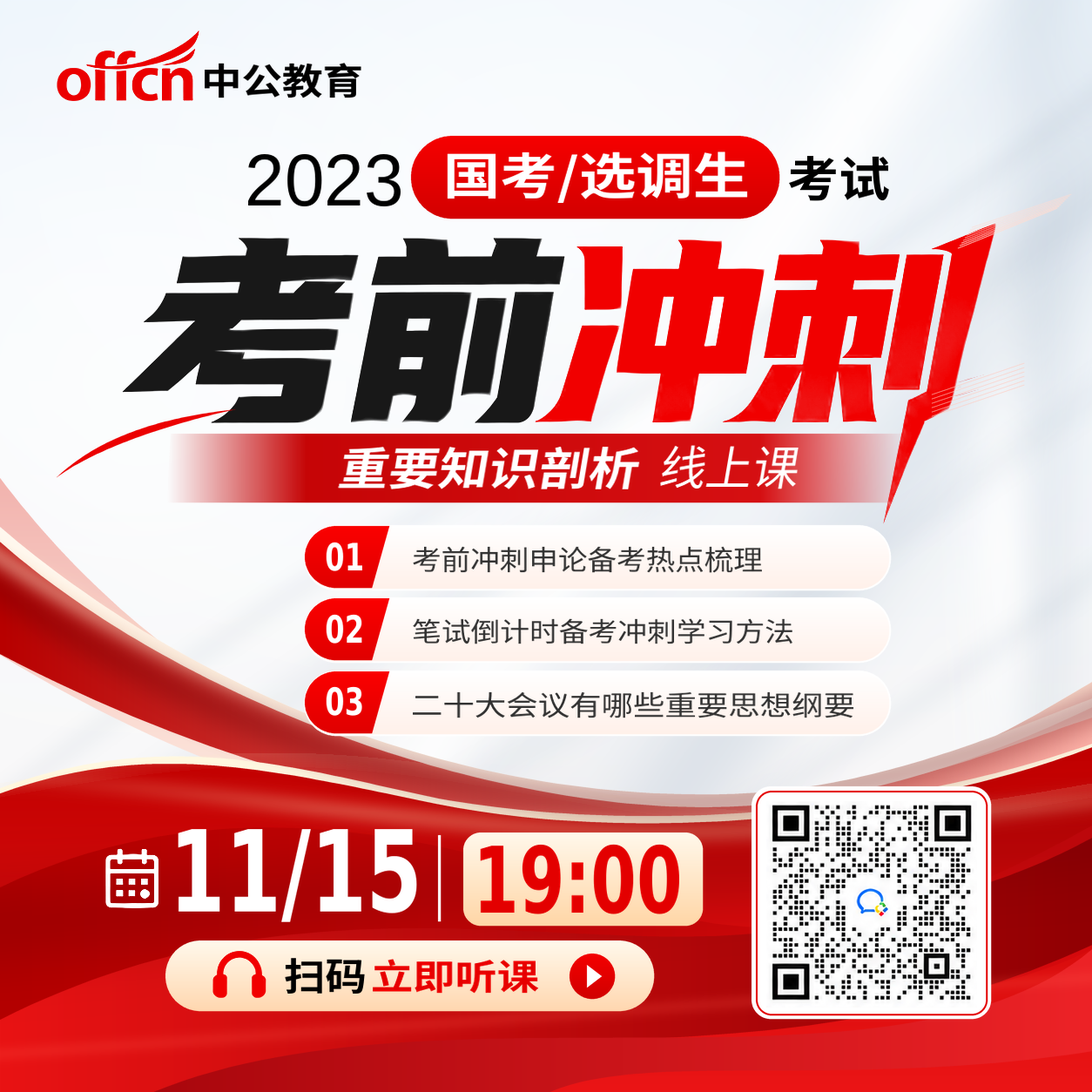
<style>
.page{position:relative;width:1092px;height:1092px}
.page>*{position:absolute;margin:0}
.t1{font:35.7px "NotoSansCJKsc-Bold";color:#000000;scale:1.13 1}
.t2{font:73.3px "LiberationSans";color:#000000}
.t3{font:49.1px "NotoSansCJKsc-Bold";color:#ffffff;scale:1.16 1}
.t4{font:46.9px "NotoSansCJKsc-Bold";color:#000000;scale:1.1 1}
.t5{font:45px "NotoSansCJKsc-Bold";color:#ffffff;scale:1.11 1}
.t6{font:46.8px "NotoSansCJKsc-Regular";color:#ffffff}
.t7{font:37.8px "DejaVuSansCondensed-Bold";color:#ffffff;scale:0.82 1}
.t8{font:27px "NotoSansCJKsc-Regular";color:#303030;scale:1.08 1}
.t9{font:26.1px "NotoSansCJKsc-Regular";color:#303030;scale:1.13 1}
.t10{font:27px "NotoSansCJKsc-Regular";color:#303030;scale:1.18 1}
.t11{font:113px "DejaVuSansCondensed-Bold";color:#ffffff;scale:0.79 1}
.t12{font:91.8px "DejaVuSansCondensed-Bold";color:#e30000;scale:0.8 1}
.t13{font:37.3px "NotoSansCJKsc-Bold";color:#000000;scale:1.11 1}
.t14{font:34.8px "NotoSansCJKsc-Bold";color:#e60000;scale:1.21 1}
</style>
<div class="page">
<p class="t1" style="left:205px;top:63px;width:156px;height:35px">中公教育</p>
<p class="t2" style="left:248px;top:154px;width:153px;height:52px">2023</p>
<p class="t3" style="left:447px;top:152px;width:301px;height:51px">国考/选调生</p>
<p class="t4" style="left:789px;top:156px;width:100px;height:45px">考试</p>
<p class="t5" style="left:338px;top:446px;width:304px;height:43px">重要知识剖析</p>
<p class="t6" style="left:659px;top:445px;width:140px;height:44px">线上课</p>
<p class="t7" style="left:326px;top:542px;width:36px;height:29px">01</p>
<p class="t8" style="left:413px;top:546px;width:349px;height:27px">考前冲刺申论备考热点梳理</p>
<p class="t7" style="left:326px;top:614px;width:36px;height:30px">02</p>
<p class="t9" style="left:413px;top:618px;width:379px;height:26px">笔试倒计时备考冲刺学习方法</p>
<p class="t7" style="left:326px;top:686px;width:36px;height:30px">03</p>
<p class="t10" style="left:413px;top:691px;width:441px;height:27px">二十大会议有哪些重要思想纲要</p>
<p class="t11" style="left:178px;top:829px;width:239px;height:93px">11/15</p>
<p class="t12" style="left:480px;top:844px;width:199px;height:70px">19:00</p>
<p class="t13" style="left:285px;top:958px;width:80px;height:36px">扫码</p>
<p class="t14" style="left:373px;top:959px;width:166px;height:35px">立即听课</p>
</div>
